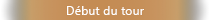
<style>
.page{position:relative;width:209px;height:20px}
.page>*{position:absolute;margin:0}
.t1{font:12.5px "LaoUI";color:#fefefe}
</style>
<div class="page">
<p class="t1" style="left:67px;top:6px;width:77px;height:9px">Début du tour</p>
</div>
